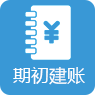
<style>
.page{position:relative;width:95px;height:95px;background:#3998d6}
.page>*{position:absolute;margin:0}
.t1{font:18px "MicrosoftYaHei";color:#ffffff}
</style>
<div class="page">
<p class="t1" style="left:13px;top:67px;width:72px;height:18px">期初建账</p>
</div>
